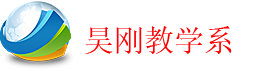
<style>
.page{position:relative;width:274px;height:71px;background:#ffffff}
.page>*{position:absolute;margin:0}
.t1{font:30px "SimSun";color:#ff0000}
.t2{font:30px "SimSun";color:#ffff00}
</style>
<div class="page">
<p class="t1" style="left:85px;top:26px;width:147px;height:28px">昊刚教学系<span class="t2">统</span></p>
</div>
